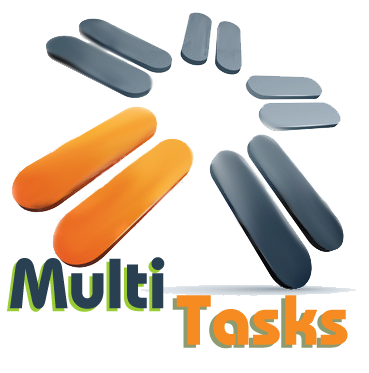
<style>
.page{position:relative;width:369px;height:373px;background:#ffffff}
.page>*{position:absolute;margin:0}
.t1{font:70.9px "00222";color:#294052}
.t2{font:70.9px "00222";color:#f68b21}
</style>
<div class="page">
<p class="t1" style="left:10px;top:257px;width:155px;height:52px">Multi</p>
<p class="t1" style="left:7px;top:260px;width:155px;height:52px">Multi</p>
<p class="t2" style="left:172px;top:298px;width:172px;height:51px">Tasks</p>
<p class="t2" style="left:176px;top:295px;width:172px;height:51px">Tasks</p>
</div>
